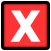
<style>
.page{position:relative;width:51px;height:51px;background:#ff3333}
.page>*{position:absolute;margin:0}
.t1{font:43px "Tahoma-Bold";color:#ffffff}
</style>
<div class="page">
<p class="t1" style="left:10px;top:10px;width:31px;height:32px">X</p>
</div>
